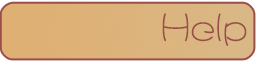
<style>
.page{position:relative;width:256px;height:64px}
.page>*{position:absolute;margin:0}
.t1{font:35.4px "DFYuanYuan-W2-HKP-BF";color:#994e49;font-weight:bold}
</style>
<div class="page">
<p class="t1" style="left:162px;top:13px;width:85px;height:33px">Help</p>
</div>
